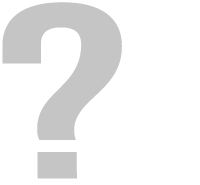
<style>
.page{position:relative;width:200px;height:185px;background:#ffffff}
.page>*{position:absolute;margin:0}
.t1{font:248.5px "BebasNeue";color:#c5c5c5;scale:1.48 1}
</style>
<div class="page">
<p class="t1" style="left:2px;top:2px;width:120px;height:177px">?</p>
</div>
